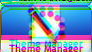
<style>
.page{position:relative;width:92px;height:52px}
.page>*{position:absolute;margin:0}
.t1{font:10px "TrebuchetMS-Bold"}
</style>
<div class="page">
<p class="t1" style="left:9px;top:38px;width:74px;height:10px">Theme Manager</p>
</div>
